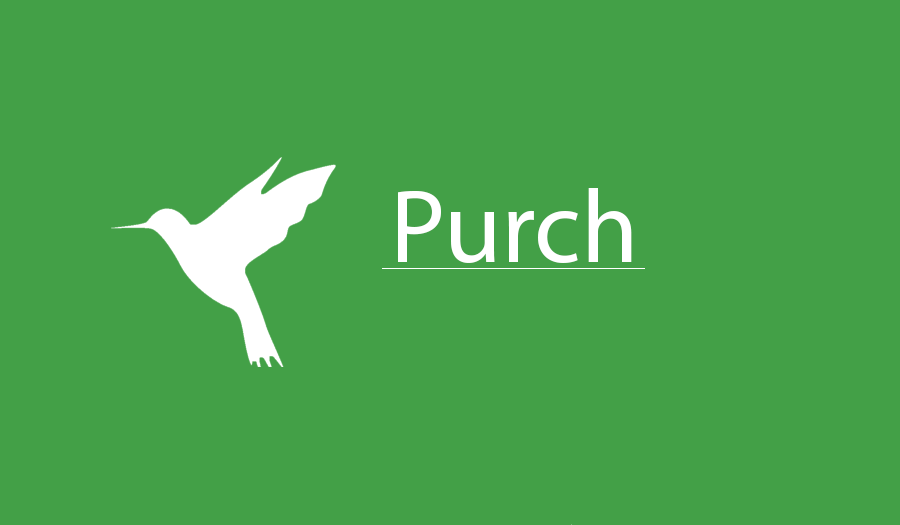
<style>
.page{position:relative;width:900px;height:525px;background:#43a047}
.page>*{position:absolute;margin:0}
.t1{font:104.2px "MyriadPro-Regular";color:#ffffff}
</style>
<div class="page">
<p class="t1" style="left:398px;top:188px;width:234px;height:75px">Purch</p>
</div>
